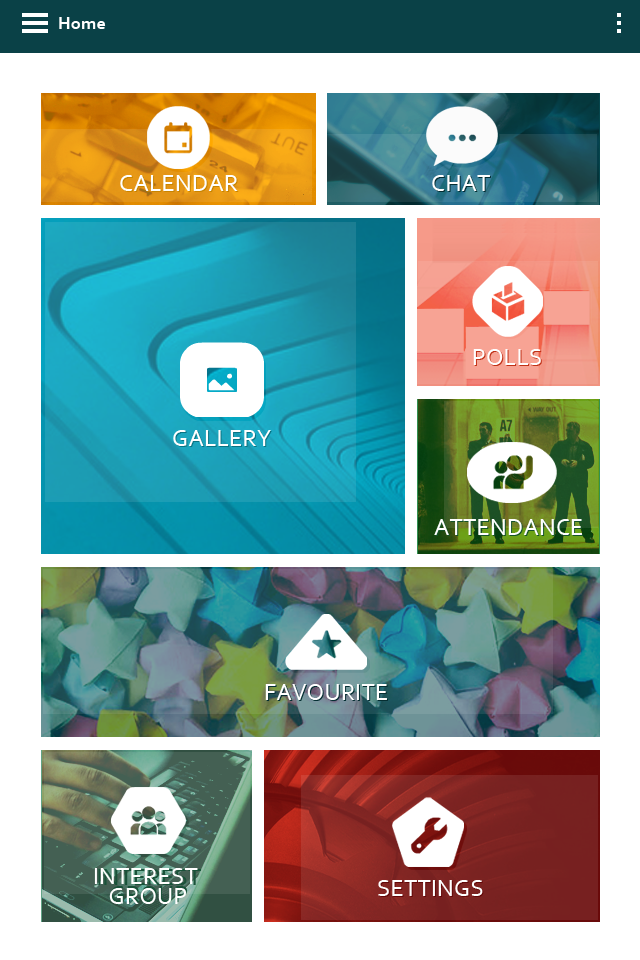
<style>
.page{position:relative;width:640px;height:960px;background:#ffffff}
.page>*{position:absolute;margin:0}
.t1{font:18px "Corbel-Bold";letter-spacing:0.01em;color:#ffffff}
.t2{font:24px "Corbel";letter-spacing:0.01em;color:#ffffff}
.t3{font:24px "Corbel";letter-spacing:0.01em}
.t4{font:24px/20px "Corbel";letter-spacing:0.01em;color:#ffffff}
</style>
<div class="page">
<p class="t1" style="left:59px;top:17px;width:47px;height:12px">Home</p>
<p class="t2" style="left:120px;top:175px;width:118px;height:16px">CALENDAR</p>
<p class="t3" style="left:121px;top:176px;width:118px;height:16px">CALENDAR</p>
<p class="t2" style="left:432px;top:175px;width:58px;height:16px">CHAT</p>
<p class="t3" style="left:433px;top:176px;width:58px;height:16px">CHAT</p>
<p class="t2" style="left:473px;top:349px;width:68px;height:16px">POLLS</p>
<p class="t3" style="left:474px;top:350px;width:68px;height:16px">POLLS</p>
<p class="t2" style="left:173px;top:430px;width:98px;height:16px">GALLERY</p>
<p class="t3" style="left:174px;top:431px;width:98px;height:16px">GALLERY</p>
<p class="t2" style="left:434px;top:519px;width:148px;height:16px">ATTENDANCE</p>
<p class="t3" style="left:435px;top:520px;width:148px;height:16px">ATTENDANCE</p>
<p class="t2" style="left:265px;top:684px;width:122px;height:16px">FAVOURITE</p>
<p class="t4" style="left:94px;top:868px;width:104px;height:36px;text-align:center">INTEREST <br>GROUP</p>
<p class="t2" style="left:378px;top:880px;width:105px;height:16px">SETTINGS</p>
<p class="t3" style="left:379px;top:881px;width:105px;height:16px">SETTINGS</p>
</div>
